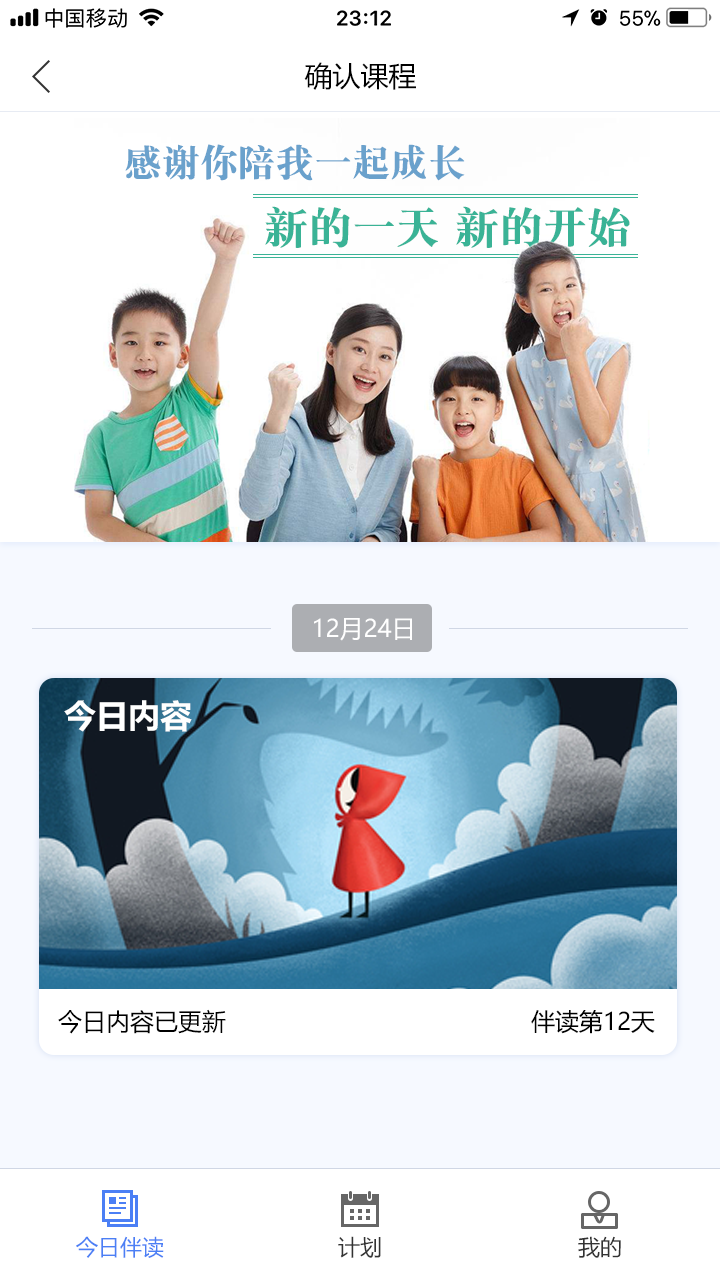
<style>
.page{position:relative;width:720px;height:1280px;background:#ffffff}
.page>*{position:absolute;margin:0}
.t1{font:28px "MicrosoftYaHei";color:#000000}
.t2{font:38px "DFPSongW9";color:#6aa1cc}
.t3{font:44px "DFPSongW9";color:#3ab396}
.t4{font:24px "MicrosoftYaHei";color:#ffffff}
.t5{font:32px "MicrosoftYaHei-Bold";color:#ffffff}
.t6{font:24px "MicrosoftYaHei";color:#000000}
.t7{font:22px "MicrosoftYaHei";color:#4b7ff5}
.t8{font:22px "MicrosoftYaHei";color:#333333}
</style>
<div class="page">
<p class="t1" style="left:304px;top:62px;width:112px;height:28px">确认课程</p>
<p class="t2" style="left:125px;top:144px;width:340px;height:37px">感谢你陪我一起成长</p>
<p class="t3" style="left:265px;top:206px;width:365px;height:42px">新的一天 新的开始</p>
<p class="t4" style="left:314px;top:618px;width:98px;height:23px">12月24日</p>
<p class="t5" style="left:64px;top:700px;width:128px;height:32px">今日内容</p>
<p class="t6" style="left:58px;top:1009px;width:168px;height:25px">今日内容已更新</p>
<p class="t6" style="left:531px;top:1010px;width:124px;height:24px">伴读第12天</p>
<p class="t7" style="left:76px;top:1236px;width:88px;height:22px">今日伴读</p>
<p class="t8" style="left:338px;top:1236px;width:43px;height:22px">计划</p>
<p class="t8" style="left:578px;top:1236px;width:43px;height:22px">我的</p>
</div>
